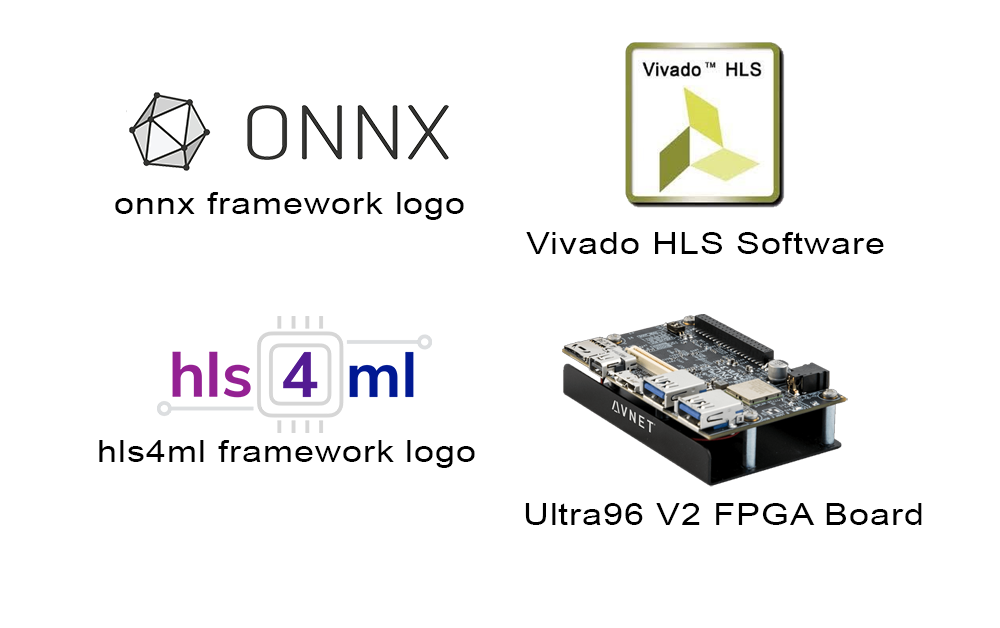
<style>
.page{position:relative;width:1000px;height:628px;background:#ffffff}
.page>*{position:absolute;margin:0}
.t1{font:31.2px "ArialMT";letter-spacing:0.02em;color:#000000;scale:1.17 1}
</style>
<div class="page">
<p class="t1" style="left:115px;top:192px;width:349px;height:28px">onnx framework logo</p>
<p class="t1" style="left:526px;top:232px;width:358px;height:22px">Vivado HLS Software</p>
<p class="t1" style="left:99px;top:440px;width:376px;height:28px">hls4ml framework logo</p>
<p class="t1" style="left:525px;top:503px;width:397px;height:22px">Ultra96 V2 FPGA Board</p>
</div>
